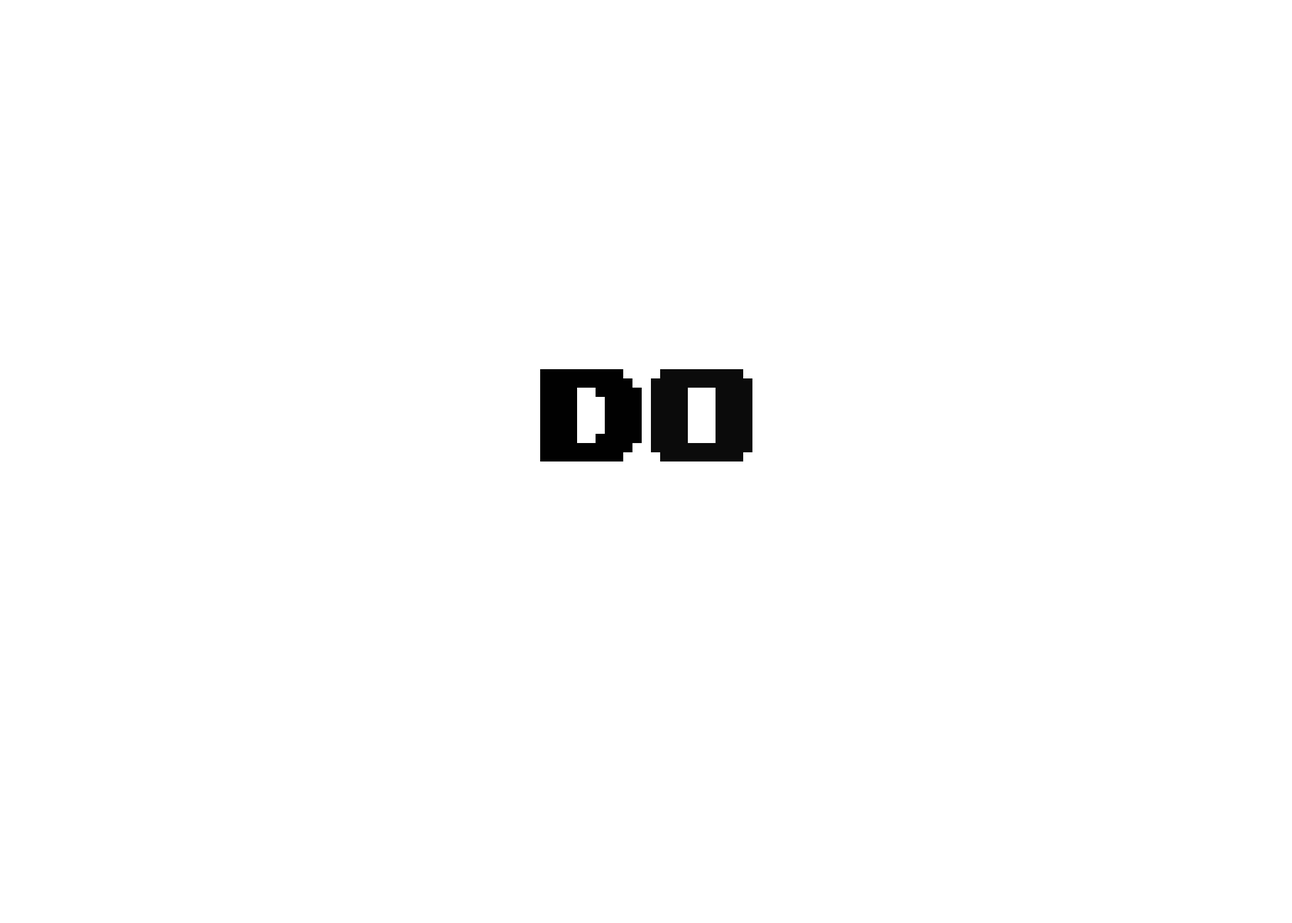
<style>
.page{position:relative;width:1292px;height:923px;background:#ffffff}
.page>*{position:absolute;margin:0}
.t1{font:184.6px "UpheavalPro-Regular";color:#010101}
.t2{font:184.6px "UpheavalPro-Regular";color:#0b0b0b}
</style>
<div class="page">
<p class="t1" style="left:540px;top:369px;width:212px;height:92px">D<span class="t2">O</span></p>
</div>
